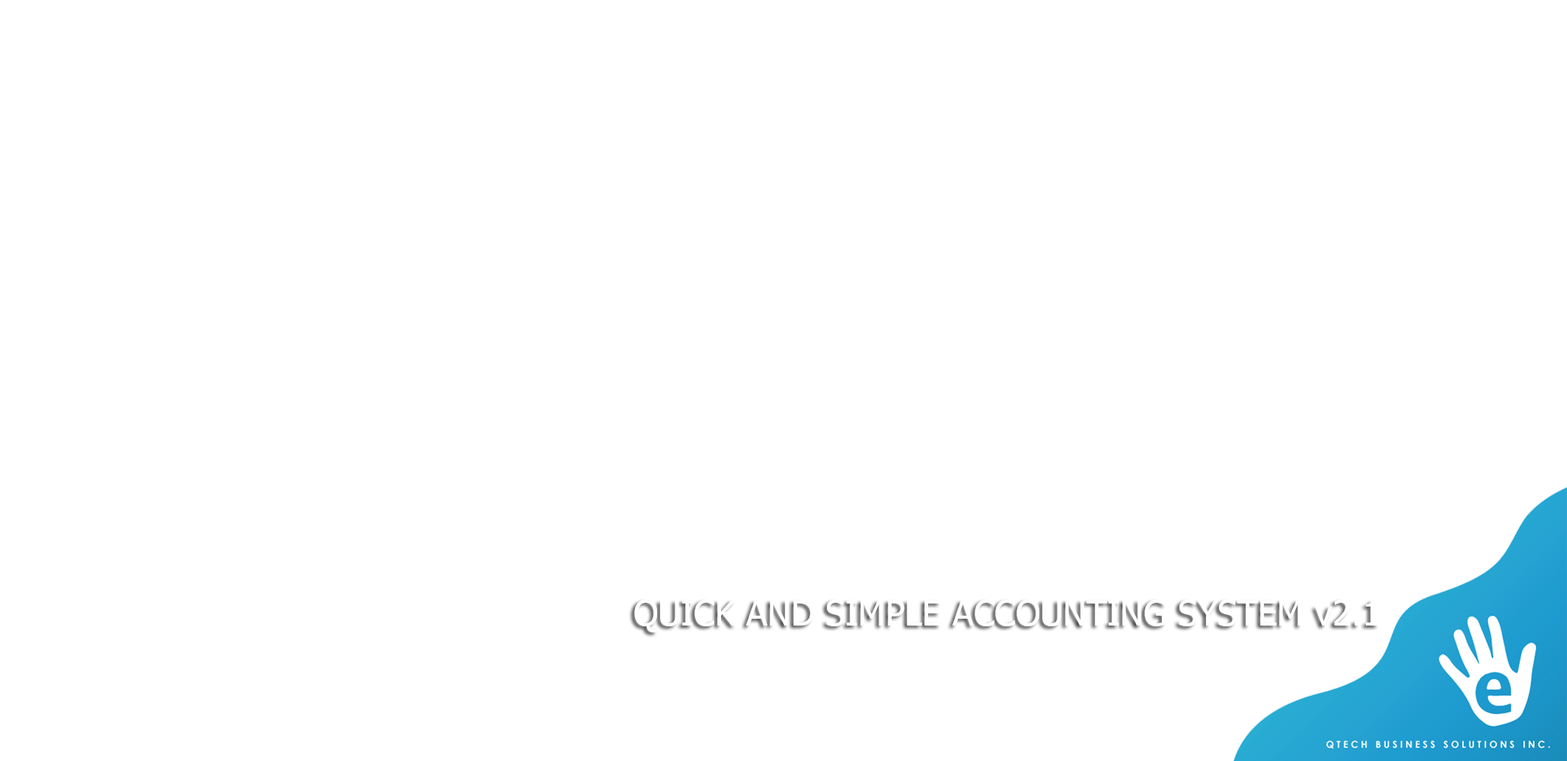
<style>
.page{position:relative;width:1567px;height:761px;background:#ffffff}
.page>*{position:absolute;margin:0}
.t1{font:35px "Tahoma";color:#ffffff}
</style>
<div class="page">
<p class="t1" style="left:634px;top:600px;width:745px;height:33px">QUICK AND SIMPLE ACCOUNTING SYSTEM v2.1</p>
</div>
